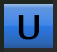
<style>
.page{position:relative;width:57px;height:52px}
.page>*{position:absolute;margin:0}
.t1{font:48px "SakkalMajalla";letter-spacing:-0.025em;color:#000000;font-variant:small-caps;font-weight:bold}
</style>
<div class="page">
<p class="t1" style="left:18px;top:15px;width:21px;height:25px">U</p>
</div>
